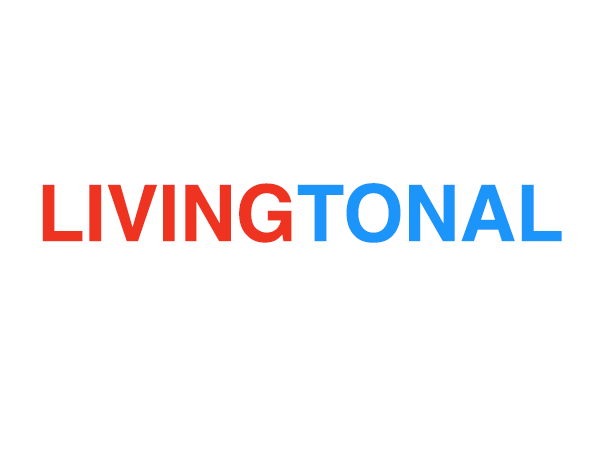
<style>
.page{position:relative;width:600px;height:450px;background:#ffffff}
.page>*{position:absolute;margin:0}
.t1{font:78.1px "Helvetica-Bold";color:#ee3320}
.t2{font:78.1px "Helvetica-Bold";color:#1b95fa}
</style>
<div class="page">
<p class="t1" style="left:42px;top:183px;width:520px;height:60px">LIVING<span class="t2">TONAL</span></p>
</div>
